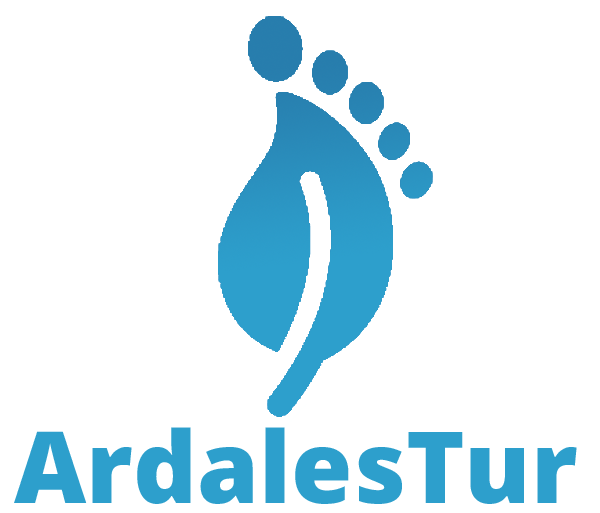
<style>
.page{position:relative;width:600px;height:513px;background:#ffffff}
.page>*{position:absolute;margin:0}
.t1{font:99.6px "OpenSans-Extrabold";color:#2d9fcc}
</style>
<div class="page">
<p class="t1" style="left:14px;top:427px;width:563px;height:77px">ArdalesTur</p>
</div>
